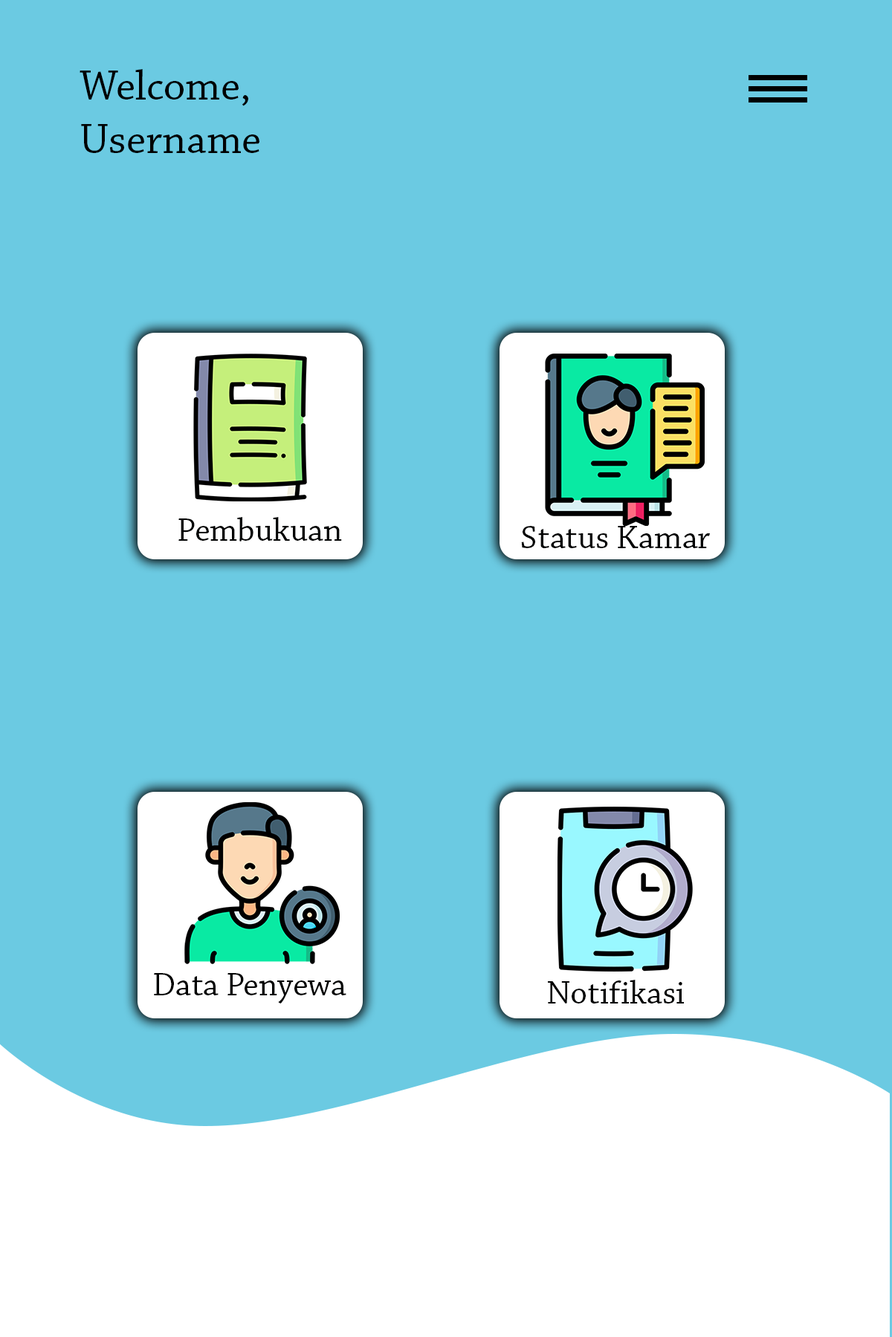
<style>
.page{position:relative;width:892px;height:1337px;background:#6bcae2}
.page>*{position:absolute;margin:0}
.t1{font:43.3px "ChaparralPro-Regular";color:#000101}
.t2{font:34px "ChaparralPro-Regular";color:#000101}
.t3{font:34.1px "ChaparralPro-Regular";color:#000101}
</style>
<div class="page">
<p class="t1" style="left:80px;top:69px;width:168px;height:37px">Welcome,</p>
<p class="t1" style="left:81px;top:124px;width:178px;height:29px">Username</p>
<p class="t2" style="left:178px;top:517px;width:164px;height:25px">Pembukuan</p>
<p class="t3" style="left:521px;top:526px;width:189px;height:22px">Status Kamar</p>
<p class="t3" style="left:154px;top:973px;width:192px;height:31px">Data Penyewa</p>
<p class="t3" style="left:548px;top:980px;width:136px;height:24px">Notifikasi</p>
</div>
